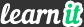
<style>
.page{position:relative;width:84px;height:27px;background:#333333}
.page>*{position:absolute;margin:0}
.t1{font:28.3px "NautilusPompilius";color:#ffffff}
.t2{font:28.3px "NautilusPompilius";color:#00cc73}
</style>
<div class="page">
<p class="t1" style="left:0px;top:3px;width:61px;height:21px">learn</p>
<p class="t2" style="left:65px;top:3px;width:16px;height:21px">it</p>
</div>
